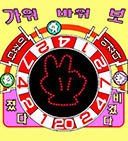
<style>
.page{position:relative;width:128px;height:141px}
.page>*{position:absolute;margin:0}
.t1{font:17.3px "HeadlineR-HM"}
.t2{font:8.2px "H2gtrE";color:#ffffff}
.t3{font:10.9px "HeadlineR-HM"}
.t4{font:9.6px "HeadlineR-HM"}
</style>
<div class="page">
<p class="t1" style="left:2px;top:8px;width:123px;height:16px">가위  바위  보</p>
<p class="t2" style="left:7px;top:37px;width:21px;height:24px;rotate:36deg">이겼다</p>
<p class="t2" style="left:100px;top:37px;width:22px;height:23px;rotate:-40deg">이겼다</p>
<p class="t3" style="left:7px;top:100px;width:20px;height:24px">졌<br>  다</p>
<p class="t4" style="left:104px;top:93px;width:17px;height:32px">비<br> 겼<br>다</p>
</div>
